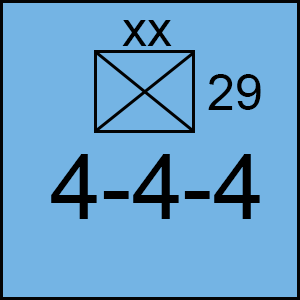
<style>
.page{position:relative;width:300px;height:300px;background:#74b4e4}
.page>*{position:absolute;margin:0}
.t1{font:50px "ArialMT";color:#000000}
.t2{font:91.7px "ArialMT";color:#000000}
</style>
<div class="page">
<p class="t1" style="left:122px;top:20px;width:50px;height:26px">xx</p>
<p class="t1" style="left:208px;top:74px;width:53px;height:36px">29</p>
<p class="t2" style="left:51px;top:154px;width:209px;height:65px">4-4-4</p>
</div>
